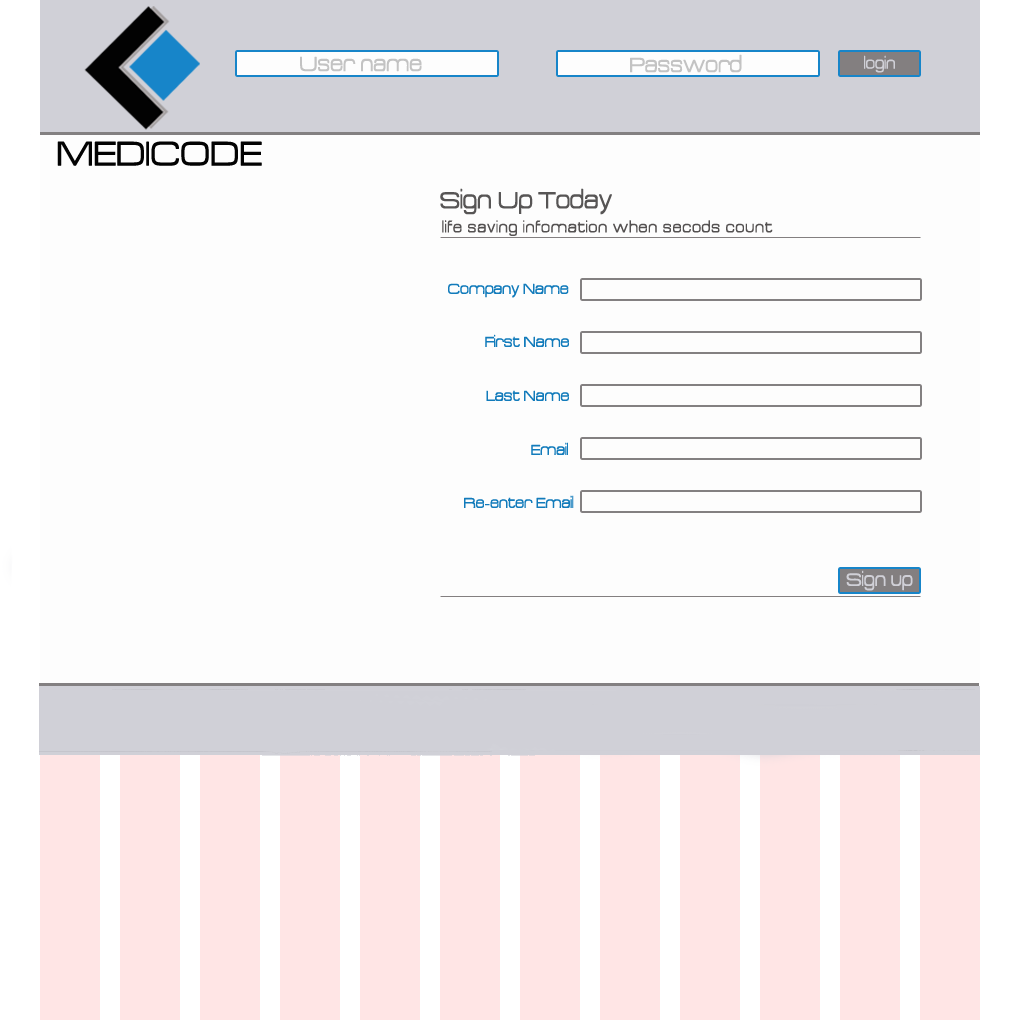
<style>
.page{position:relative;width:1020px;height:1020px;background:#fdfdfd}
.page>*{position:absolute;margin:0}
.t1{font:22.7px "Acens";color:#c3c3c3}
.t2{font:16.7px "Acens";color:#d0d0d7}
.t3{font:37.7px "Acens";color:#020202}
.t4{font:25.7px "Acens";color:#575555}
.t5{font:15.7px "Acens";letter-spacing:0.06em;color:#545252}
.t6{font:15.7px "Acens";color:#127bbb}
.t7{font:19.7px "Acens";color:#d0d0d7}
</style>
<div class="page">
<p class="t1" style="left:630px;top:54px;width:112px;height:19px">Password</p>
<p class="t1" style="left:300px;top:56px;width:122px;height:16px">User name</p>
<p class="t2" style="left:864px;top:55px;width:31px;height:18px">login</p>
<p class="t3" style="left:57px;top:141px;width:205px;height:25px">MEDICODE</p>
<p class="t4" style="left:440px;top:188px;width:172px;height:27px">Sign Up Today</p>
<p class="t5" style="left:442px;top:220px;width:331px;height:16px">life saving infomation when secods count</p>
<p class="t6" style="left:448px;top:283px;width:121px;height:15px">Company Name</p>
<p class="t6" style="left:485px;top:334px;width:84px;height:13px">First Name</p>
<p class="t6" style="left:486px;top:390px;width:83px;height:11px">Last Name</p>
<p class="t6" style="left:531px;top:442px;width:37px;height:13px">Email</p>
<p class="t6" style="left:464px;top:495px;width:110px;height:13px">Re-enter Email</p>
<p class="t7" style="left:846px;top:570px;width:67px;height:21px">Sign up</p>
</div>
